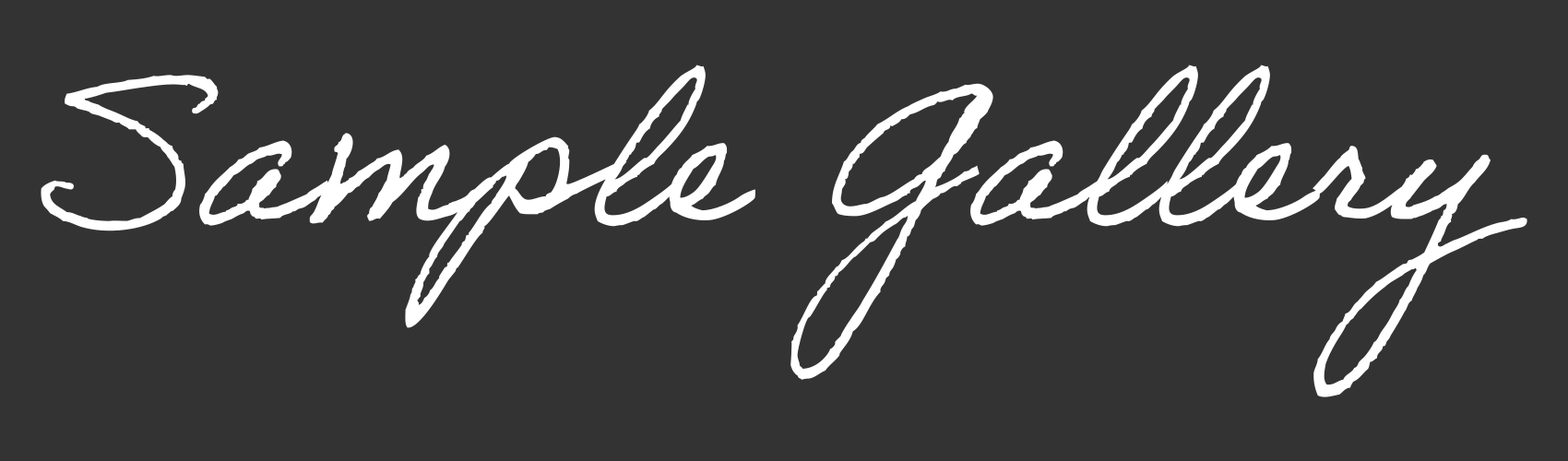
<style>
.page{position:relative;width:1568px;height:461px;background:#333333}
.page>*{position:absolute;margin:0}
.t1{font:205.6px "AdobeHandwriting-Ernie";color:#ffffff}
</style>
<div class="page">
<p class="t1" style="left:41px;top:65px;width:1486px;height:333px">Sample Gallery</p>
</div>
